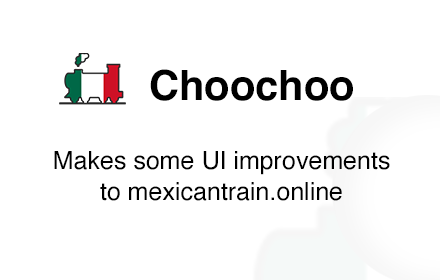
<style>
.page{position:relative;width:440px;height:280px;background:#ffffff}
.page>*{position:absolute;margin:0}
.t1{font:41.7px "Helvetica-Bold";color:#000000}
.t2{font:25px/31.2px "Helvetica";color:#000000}
</style>
<div class="page">
<p class="t1" style="left:150px;top:69px;width:203px;height:32px">Choochoo</p>
<p class="t2" style="left:54px;top:151px;width:336px;height:50px;text-align:center">Makes some UI improvements to mexicantrain.online</p>
</div>
